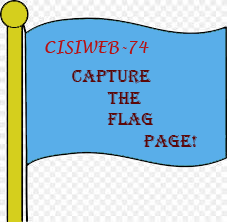
<style>
.page{position:relative;width:227px;height:222px;background:#59aee9}
.page>*{position:absolute;margin:0}
.t1{font:18px "Algerian";color:#5b0808}
</style>
<div class="page">
<p class="t1" style="left:72px;top:70px;width:125px;height:77px">Capture <br> The <br> Flag  <br>  Page!</p>
</div>
